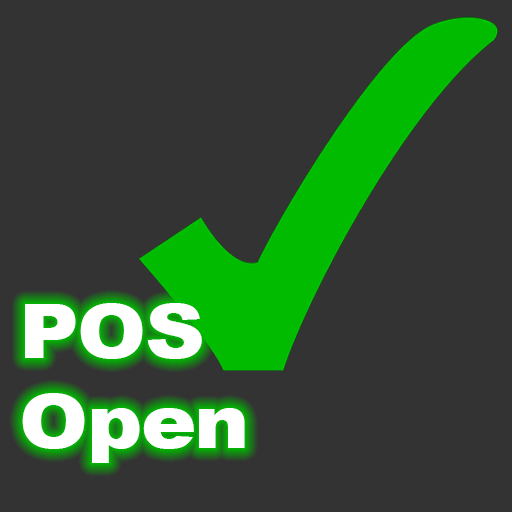
<style>
.page{position:relative;width:512px;height:512px;background:#333333}
.page>*{position:absolute;margin:0}
.t1{font:75px "Arial-Black";letter-spacing:-0.02em;color:#ffffff;scale:1.11 1}
</style>
<div class="page">
<p class="t1" style="left:22px;top:303px;width:223px;height:160px">POS<br>Open</p>
</div>
